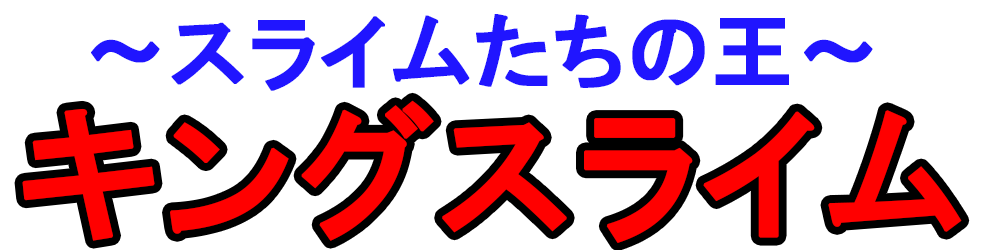
<style>
.page{position:relative;width:1000px;height:250px;background:#ffffff}
.page>*{position:absolute;margin:0}
.t1{font:83px "HGPGothicE";color:#2015ff;font-weight:bold}
.t2{font:144.7px "HGPGothicE";color:#ff0000;font-weight:bold}
</style>
<div class="page">
<p class="t1" style="left:91px;top:14px;width:782px;height:77px">～スライムたちの王～</p>
<p class="t2" style="left:22px;top:100px;width:940px;height:143px">キングスライム</p>
</div>
